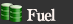
<style>
.page{position:relative;width:73px;height:24px;background:#333333}
.page>*{position:absolute;margin:0}
.t1{font:16px "RyuminPro-ExBold";letter-spacing:-0.08em;color:#fcf3ee}
</style>
<div class="page">
<p class="t1" style="left:27px;top:8px;width:29px;height:14px">Fuel</p>
</div>
